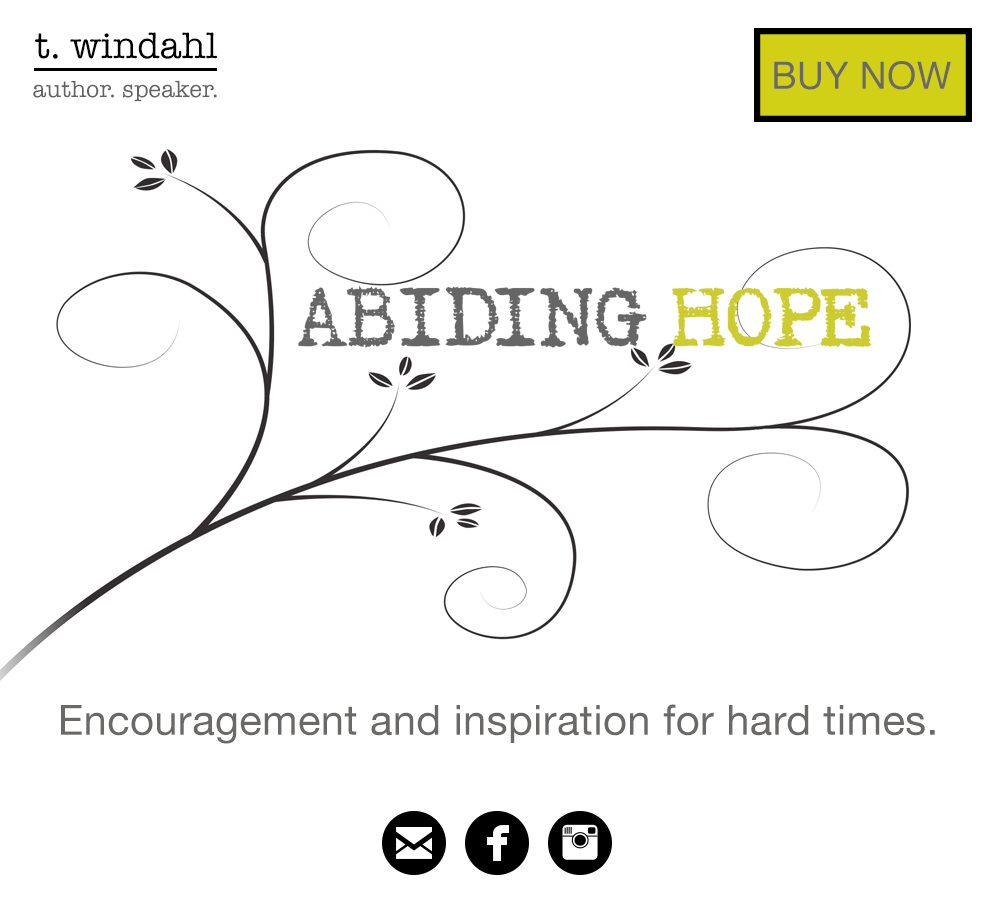
<style>
.page{position:relative;width:995px;height:900px;background:#ffffff}
.page>*{position:absolute;margin:0}
.t1{font:37.5px "AmericanTypewriter";letter-spacing:0.01em;color:#000000}
.t2{font:37.5px "Helvetica";letter-spacing:0.01em;color:#6a6967}
.t3{font:23.7px "AmericanTypewriter";letter-spacing:0.01em;color:#646260}
.t4{font:41.7px "HelveticaNeue";letter-spacing:0.01em;color:#6a6967}
</style>
<div class="page">
<p class="t1" style="left:35px;top:32px;width:182px;height:27px">t. windahl</p>
<p class="t2" style="left:774px;top:61px;width:177px;height:29px">BUY NOW</p>
<p class="t3" style="left:33px;top:80px;width:184px;height:22px">author. speaker.</p>
<p class="t4" style="left:61px;top:704px;width:874px;height:40px">Encouragement and inspiration for hard times.</p>
</div>
